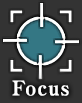
<style>
.page{position:relative;width:82px;height:103px;background:#333333}
.page>*{position:absolute;margin:0}
.t1{font:20px "RyuminPro-ExBold";letter-spacing:0.04em;color:#ffffff}
</style>
<div class="page">
<p class="t1" style="left:12px;top:80px;width:57px;height:16px">Focus</p>
</div>
